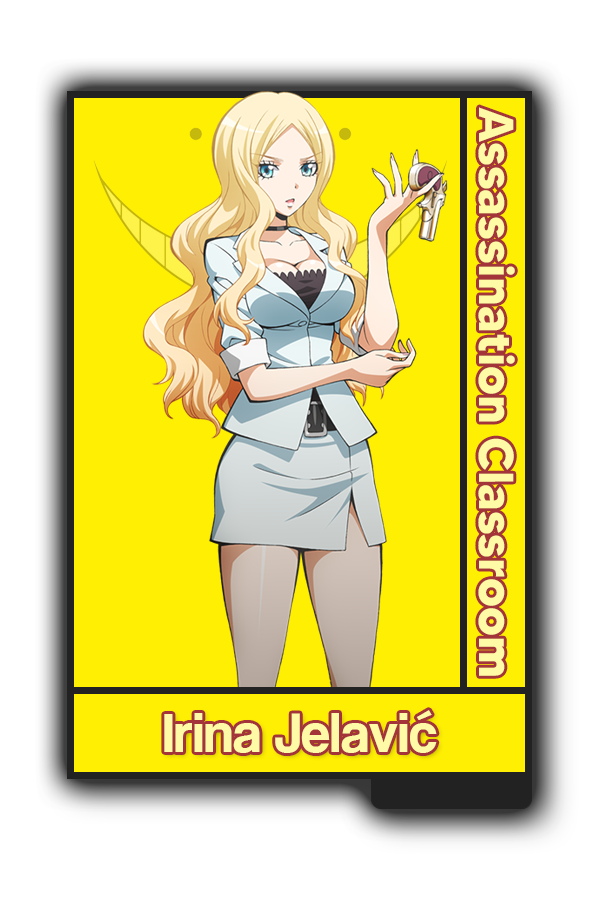
<style>
.page{position:relative;width:600px;height:900px;background:#ffef03}
.page>*{position:absolute;margin:0}
.t1{font:48.8px "MADETOMMY-Bold";color:#fefaa5}
.t2{font:57.8px "CoolveticaRg-Regular";color:#fefaa5}
</style>
<div class="page">
<p class="t1" style="left:478px;top:107px;width:37px;height:569px;rotate:90deg">Assassination Classroom</p>
<p class="t2" style="left:164px;top:710px;width:273px;height:43px">Irina Jelavić</p>
</div>
